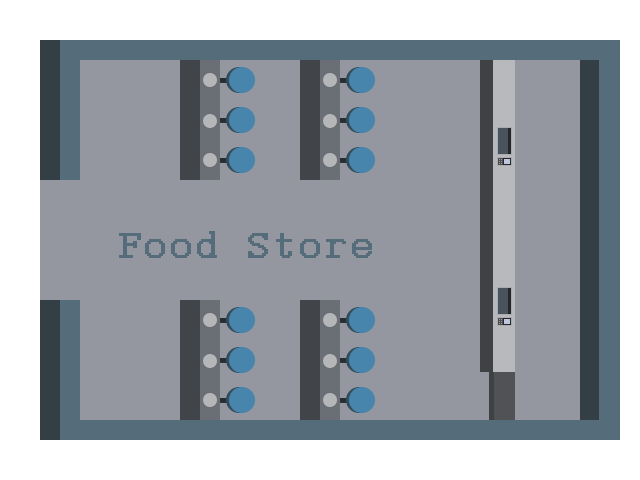
<style>
.page{position:relative;width:640px;height:480px;background:#9497a0}
.page>*{position:absolute;margin:0}
.t1{font:45.8px "Courier";color:#556c7b;font-weight:bold}
</style>
<div class="page">
<p class="t1" style="left:119px;top:231px;width:253px;height:27px">Food Store</p>
</div>
